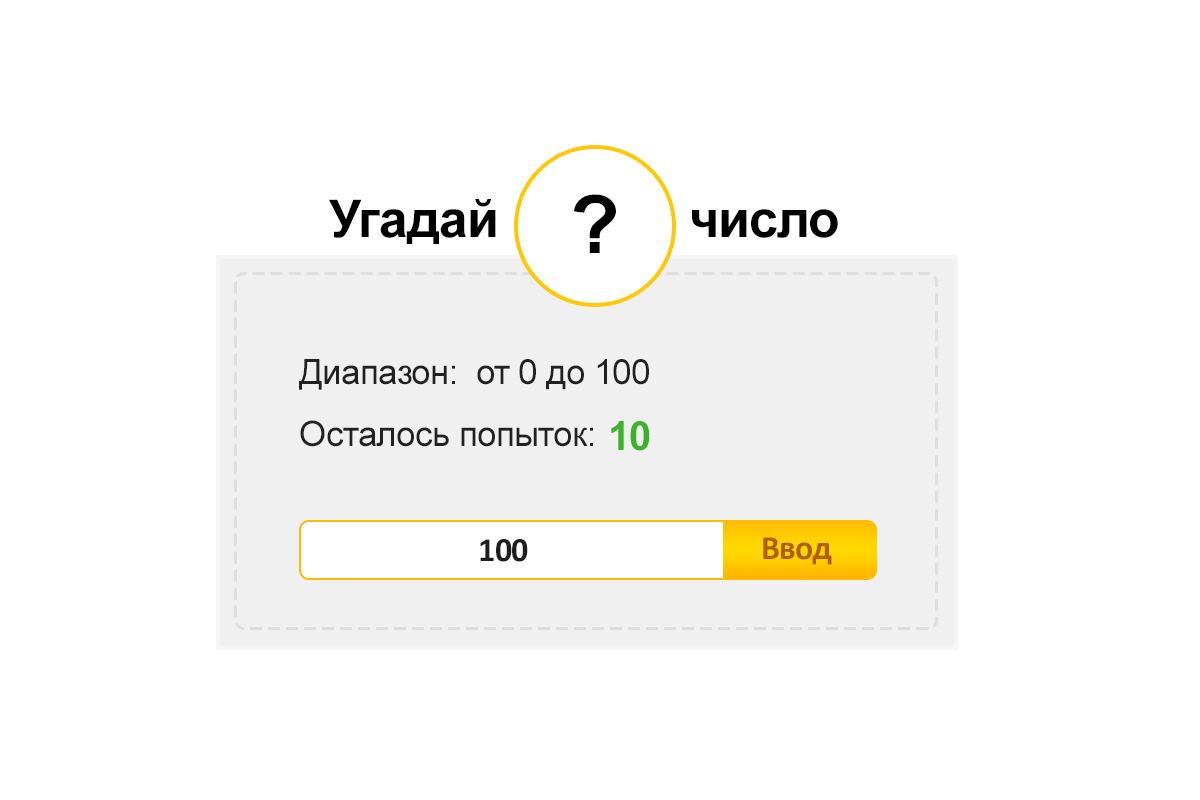
<style>
.page{position:relative;width:1200px;height:800px;background:#ffffff}
.page>*{position:absolute;margin:0}
.t1{font:81px "Arial-BoldMT";letter-spacing:-0.02em;color:#000000}
.t2{font:52px "Arial-BoldMT";letter-spacing:-0.02em;color:#000000}
.t3{font:35px "ArialMT";letter-spacing:-0.02em;color:#212121}
.t4{font:40px "Arial-BoldMT";letter-spacing:-0.02em;color:#3db12a}
.t5{font:34px "Calibri-Bold";letter-spacing:-0.02em;color:#1e1e1e}
.t6{font:34px "Calibri-Bold";letter-spacing:-0.02em;color:#b45d00}
</style>
<div class="page">
<p class="t1" style="left:574px;top:194px;width:42px;height:59px">?</p>
<p class="t2" style="left:329px;top:199px;width:167px;height:45px">Угадай</p>
<p class="t2" style="left:692px;top:209px;width:146px;height:29px">число</p>
<p class="t3" style="left:299px;top:359px;width:156px;height:31px">Диапазон:</p>
<p class="t3" style="left:477px;top:359px;width:172px;height:31px">от 0 до 100</p>
<p class="t3" style="left:300px;top:420px;width:293px;height:27px">Осталось попыток:</p>
<p class="t4" style="left:611px;top:421px;width:39px;height:30px">10</p>
<p class="t5" style="left:480px;top:539px;width:48px;height:23px">100</p>
<p class="t6" style="left:763px;top:537px;width:69px;height:28px">Ввод</p>
</div>
